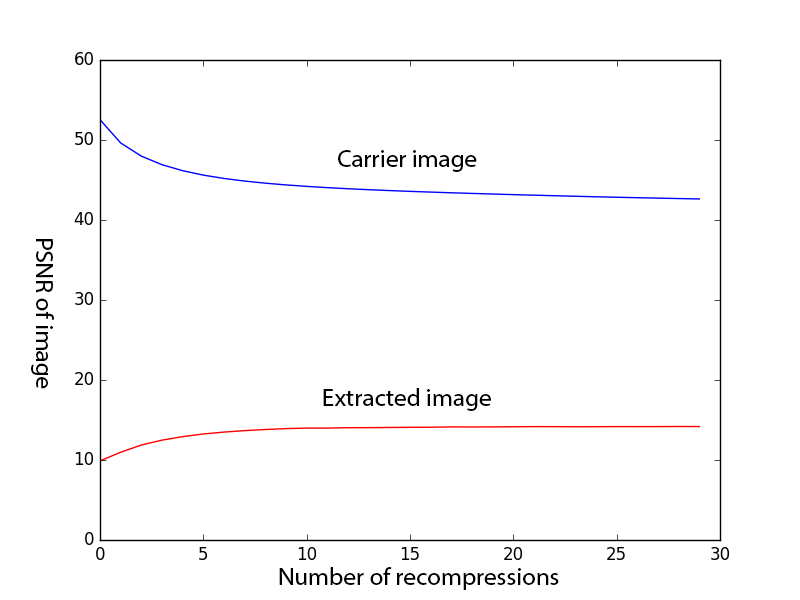
<style>
.page{position:relative;width:800px;height:600px;background:#ffffff}
.page>*{position:absolute;margin:0}
.t1{font:25px "MyriadHebrew-Regular";color:#000000}
</style>
<div class="page">
<p class="t1" style="left:338px;top:150px;width:139px;height:22px">Carrier image</p>
<p class="t1" style="left:31px;top:239px;width:23px;height:150px;text-align:right">PSNR of image</p>
<p class="t1" style="left:323px;top:388px;width:168px;height:23px">Extracted image</p>
<p class="t1" style="left:279px;top:567px;width:280px;height:23px">Number of recompressions</p>
</div>
